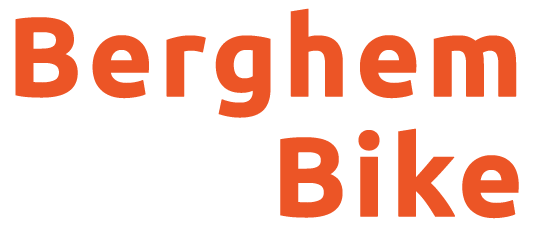
<style>
.page{position:relative;width:549px;height:233px;background:#ffffff}
.page>*{position:absolute;margin:0}
.t1{font:112px/120px "Ubuntu-Bold";letter-spacing:0.025em;color:#ec5526;font-weight:bold}
</style>
<div class="page">
<p class="t1" style="left:15px;top:8px;width:504px;height:211px">Berghem<br>Bike</p>
</div>
